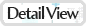
<style>
.page{position:relative;width:86px;height:26px;background:#ffffff}
.page>*{position:absolute;margin:0}
.t1{font:17.3px "AmiraParadiso";letter-spacing:-0.08em;color:#232323}
</style>
<div class="page">
<p class="t1" style="left:7px;top:6px;width:72px;height:13px">Detail View</p>
</div>
